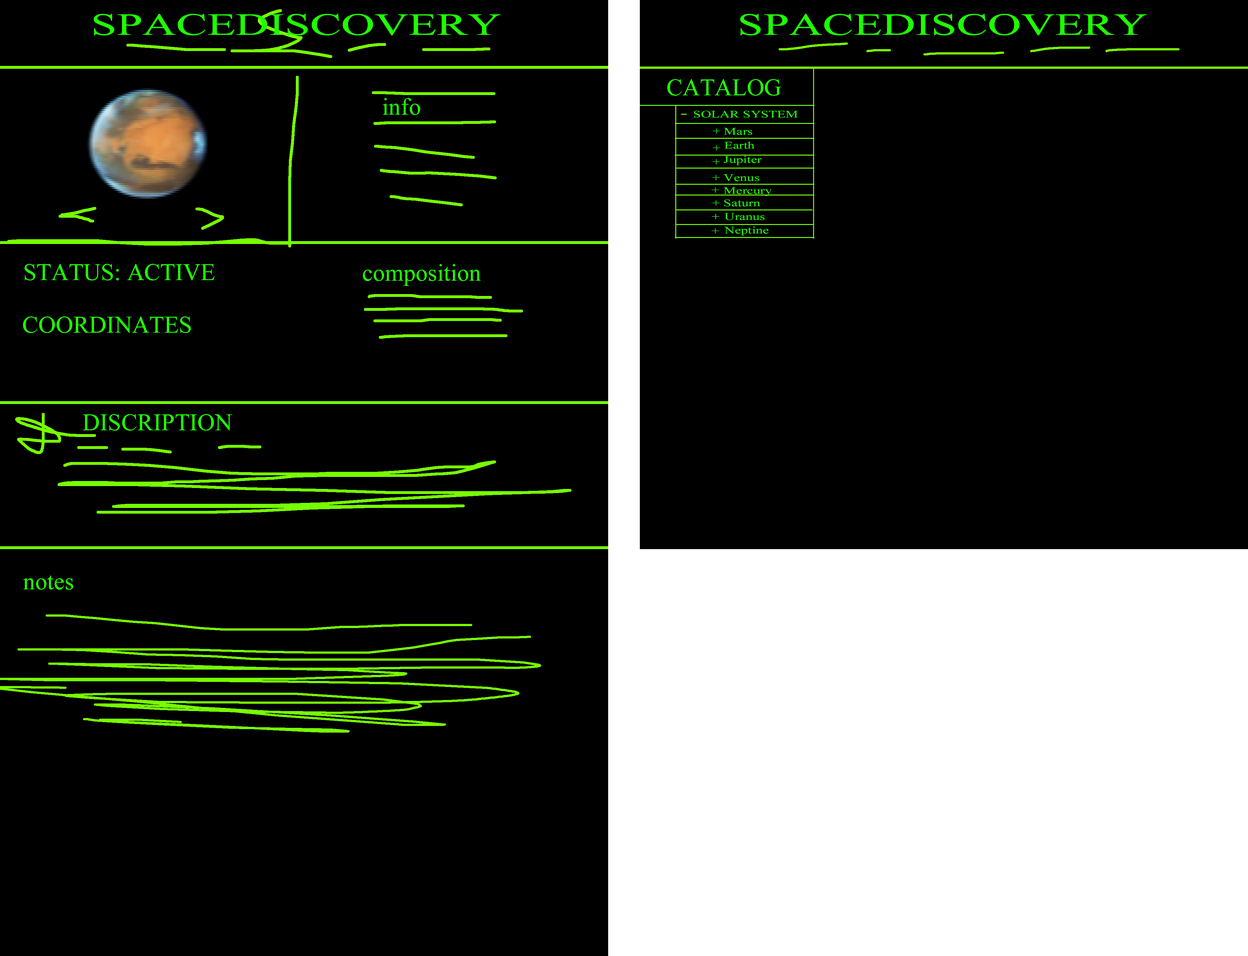
<style>
.page{position:relative;width:1248px;height:956px;background:#000000}
.page>*{position:absolute;margin:0}
.t1{font:30.9px "TimesNewRomanPSMT";color:#1eff00;scale:1.5 1}
.t2{font:24.1px "TimesNewRomanPSMT";color:#1eff00}
.t3{font:10.2px "TimesNewRomanPSMT";color:#1eff00;scale:1.38 1}
</style>
<div class="page">
<p class="t1" style="left:94px;top:14px;width:407px;height:21px">SPACEDISCOVERY</p>
<p class="t1" style="left:740px;top:14px;width:407px;height:21px">SPACEDISCOVERY</p>
<p class="t2" style="left:667px;top:79px;width:114px;height:17px">CATALOG</p>
<p class="t2" style="left:383px;top:98px;width:37px;height:17px">info</p>
<p class="t3" style="left:694px;top:111px;width:104px;height:7px">SOLAR SYSTEM</p>
<p class="t3" style="left:713px;top:128px;width:7px;height:6px">+</p>
<p class="t3" style="left:724px;top:128px;width:28px;height:7px">Mars</p>
<p class="t3" style="left:713px;top:145px;width:7px;height:5px">+</p>
<p class="t3" style="left:724px;top:141px;width:30px;height:8px">Earth</p>
<p class="t3" style="left:712px;top:159px;width:8px;height:5px">+</p>
<p class="t3" style="left:724px;top:156px;width:38px;height:9px">Jupiter</p>
<p class="t3" style="left:723px;top:174px;width:36px;height:7px">Venus</p>
<p class="t3" style="left:712px;top:175px;width:8px;height:5px">+</p>
<p class="t3" style="left:711px;top:187px;width:8px;height:6px">+</p>
<p class="t3" style="left:723px;top:187px;width:49px;height:9px">Mercury</p>
<p class="t3" style="left:712px;top:200px;width:8px;height:6px">+</p>
<p class="t3" style="left:724px;top:199px;width:36px;height:8px">Saturn</p>
<p class="t3" style="left:712px;top:214px;width:7px;height:5px">+</p>
<p class="t3" style="left:712px;top:214px;width:7px;height:5px">+</p>
<p class="t3" style="left:724px;top:213px;width:41px;height:7px">Uranus</p>
<p class="t3" style="left:711px;top:228px;width:8px;height:5px">+</p>
<p class="t3" style="left:724px;top:226px;width:45px;height:10px">Neptine</p>
<p class="t2" style="left:24px;top:264px;width:191px;height:16px">STATUS: ACTIVE</p>
<p class="t2" style="left:363px;top:264px;width:118px;height:22px">composition</p>
<p class="t2" style="left:23px;top:316px;width:168px;height:17px">COORDINATES</p>
<p class="t2" style="left:83px;top:414px;width:149px;height:16px">DISCRIPTION</p>
<p class="t2" style="left:23px;top:575px;width:50px;height:14px">notes</p>
</div>
